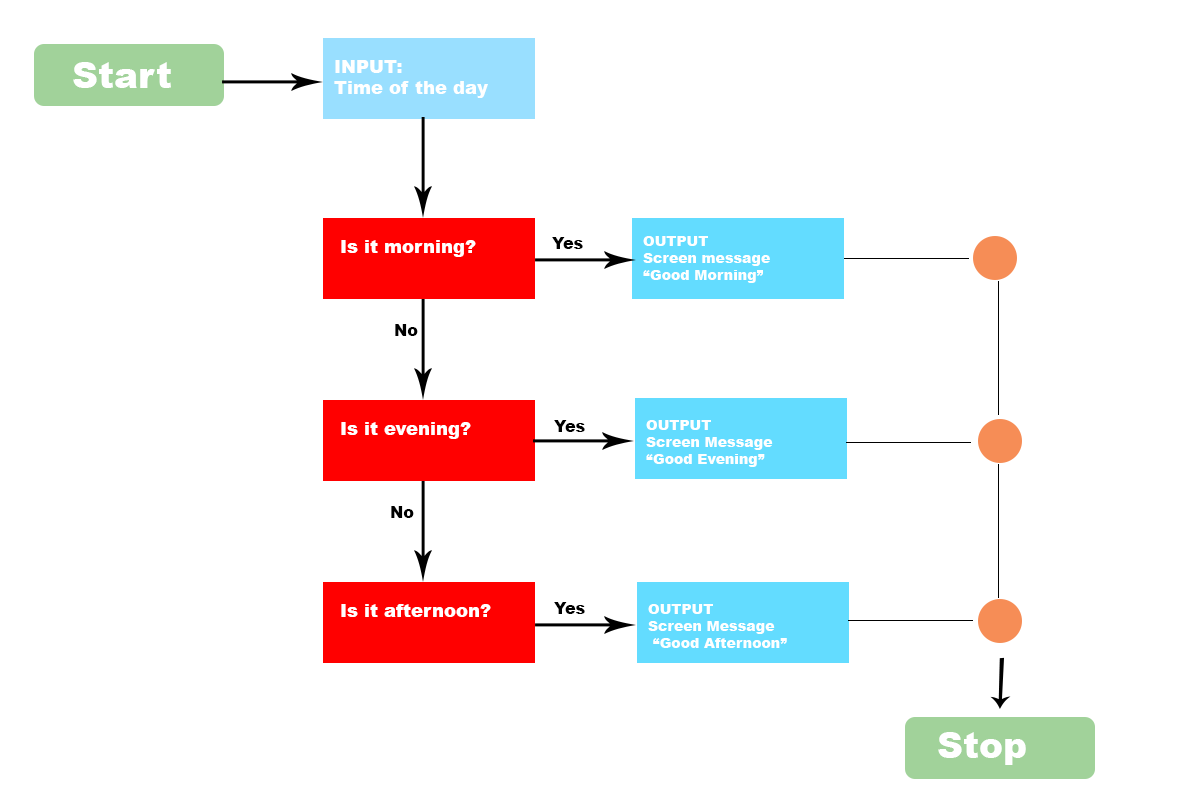
<style>
.page{position:relative;width:1200px;height:800px;background:#ffffff}
.page>*{position:absolute;margin:0}
.t1{font:36px "Arial-Black";color:#ffffff}
.t2{font:18px "Arial-Black";color:#ffffff}
.t3{font:16px "Arial-Black";color:#000000}
.t4{font:14px "Arial-Black";color:#ffffff}
</style>
<div class="page">
<p class="t1" style="left:73px;top:62px;width:98px;height:26px">Start</p>
<p class="t2" style="left:334px;top:60px;width:154px;height:38px">INPUT:<br>Time of the day</p>
<p class="t2" style="left:341px;top:240px;width:135px;height:17px">Is it morning?</p>
<p class="t3" style="left:552px;top:237px;width:31px;height:12px">Yes</p>
<p class="t4" style="left:643px;top:236px;width:127px;height:47px">OUTPUT<br>Screen message “Good Morning”</p>
<p class="t3" style="left:395px;top:324px;width:23px;height:12px">No</p>
<p class="t2" style="left:341px;top:422px;width:130px;height:17px">Is it evening?</p>
<p class="t3" style="left:554px;top:420px;width:31px;height:12px">Yes</p>
<p class="t4" style="left:646px;top:420px;width:127px;height:47px">OUTPUT <br>Screen Message <br>“Good Evening”</p>
<p class="t3" style="left:391px;top:506px;width:23px;height:12px">No</p>
<p class="t2" style="left:341px;top:604px;width:150px;height:13px">Is it afternoon?</p>
<p class="t3" style="left:554px;top:602px;width:31px;height:12px">Yes</p>
<p class="t4" style="left:648px;top:604px;width:139px;height:44px">OUTPUT<br>Screen Message<br> “Good Afternoon”</p>
<p class="t1" style="left:938px;top:732px;width:88px;height:33px">Stop</p>
</div>
